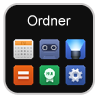
<style>
.page{position:relative;width:98px;height:98px;background:#0f0f0f}
.page>*{position:absolute;margin:0}
.t1{font:14px "ArialMT";color:#ffffff}
</style>
<div class="page">
<p class="t1" style="left:27px;top:15px;width:44px;height:11px">Ordner</p>
</div>
